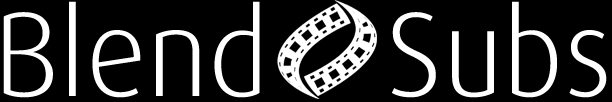
<style>
.page{position:relative;width:612px;height:102px;background:#000000}
.page>*{position:absolute;margin:0}
.t1{font:120px "Dax-Light";color:#ffffff}
</style>
<div class="page">
<p class="t1" style="left:3px;top:1px;width:257px;height:97px">Blend</p>
<p class="t1" style="left:392px;top:1px;width:215px;height:97px">Subs</p>
</div>
